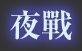
<style>
.page{position:relative;width:82px;height:51px}
.page>*{position:absolute;margin:0}
.t1{font:32px "RyuminPr6N-ExBold";color:#dcf0fd}
</style>
<div class="page">
<p class="t1" style="left:10px;top:10px;width:62px;height:30px">夜戰</p>
</div>
